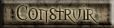
<style>
.page{position:relative;width:114px;height:28px}
.page>*{position:absolute;margin:0}
.t1{font:19px "Morpheus"}
</style>
<div class="page">
<p class="t1" style="left:16px;top:5px;width:84px;height:19px">Construir</p>
</div>
